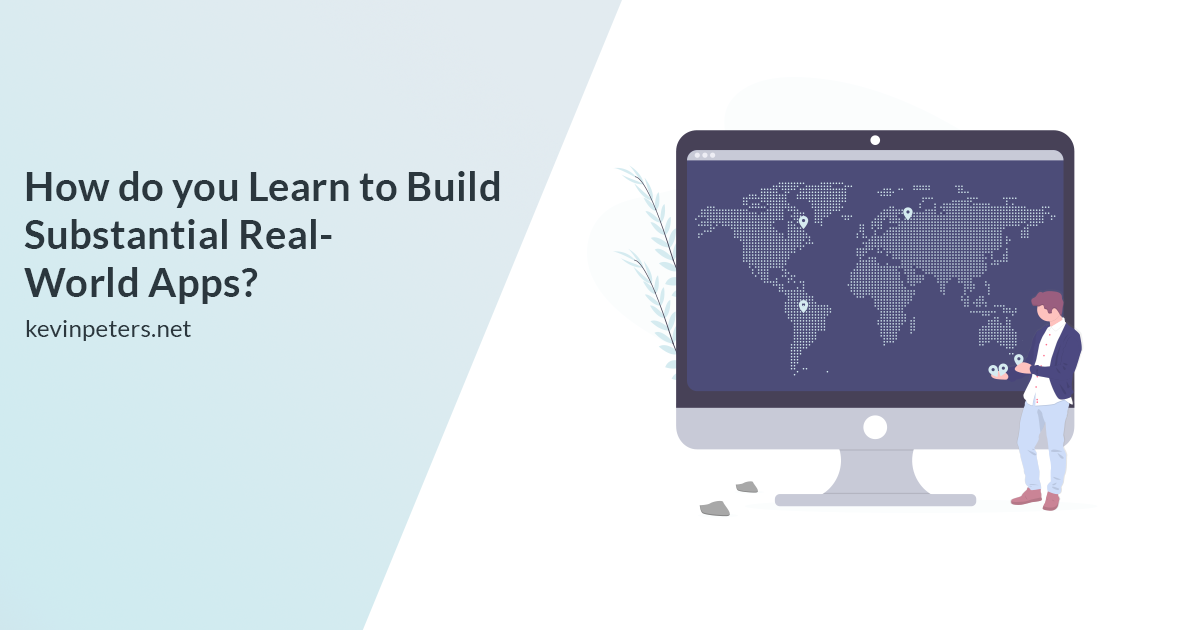
<style>
.page{position:relative;width:1200px;height:630px;background:#ffffff}
.page>*{position:absolute;margin:0}
.t1{font:40px "Lato-Bold";letter-spacing:0.01em;color:#2b373e}
.t2{font:24px "Lato-Regular";letter-spacing:0.01em;color:#2b373e}
</style>
<div class="page">
<p class="t1" style="left:24px;top:171px;width:476px;height:133px">How do you Learn to Build<br>Substantial Real-<br>World Apps?</p>
<p class="t2" style="left:26px;top:320px;width:165px;height:21px">kevinpeters.net</p>
</div>
